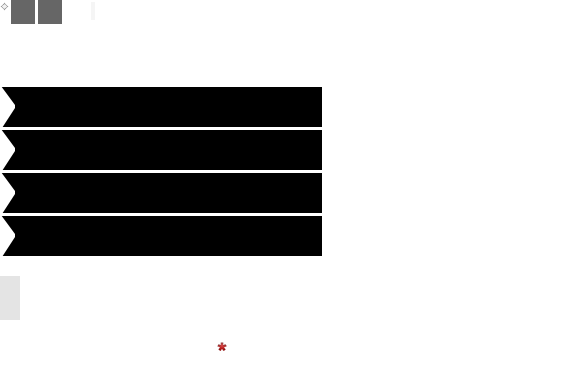
<style>
.page{position:relative;width:578px;height:387px;background:#ffffff}
.page>*{position:absolute;margin:0}
.t1{font:23px "HelveticaNeueLTPro-Bd";font-weight:bold}
</style>
<div class="page">
<p class="t1" style="left:217px;top:342px;width:10px;height:9px">*</p>
</div>
